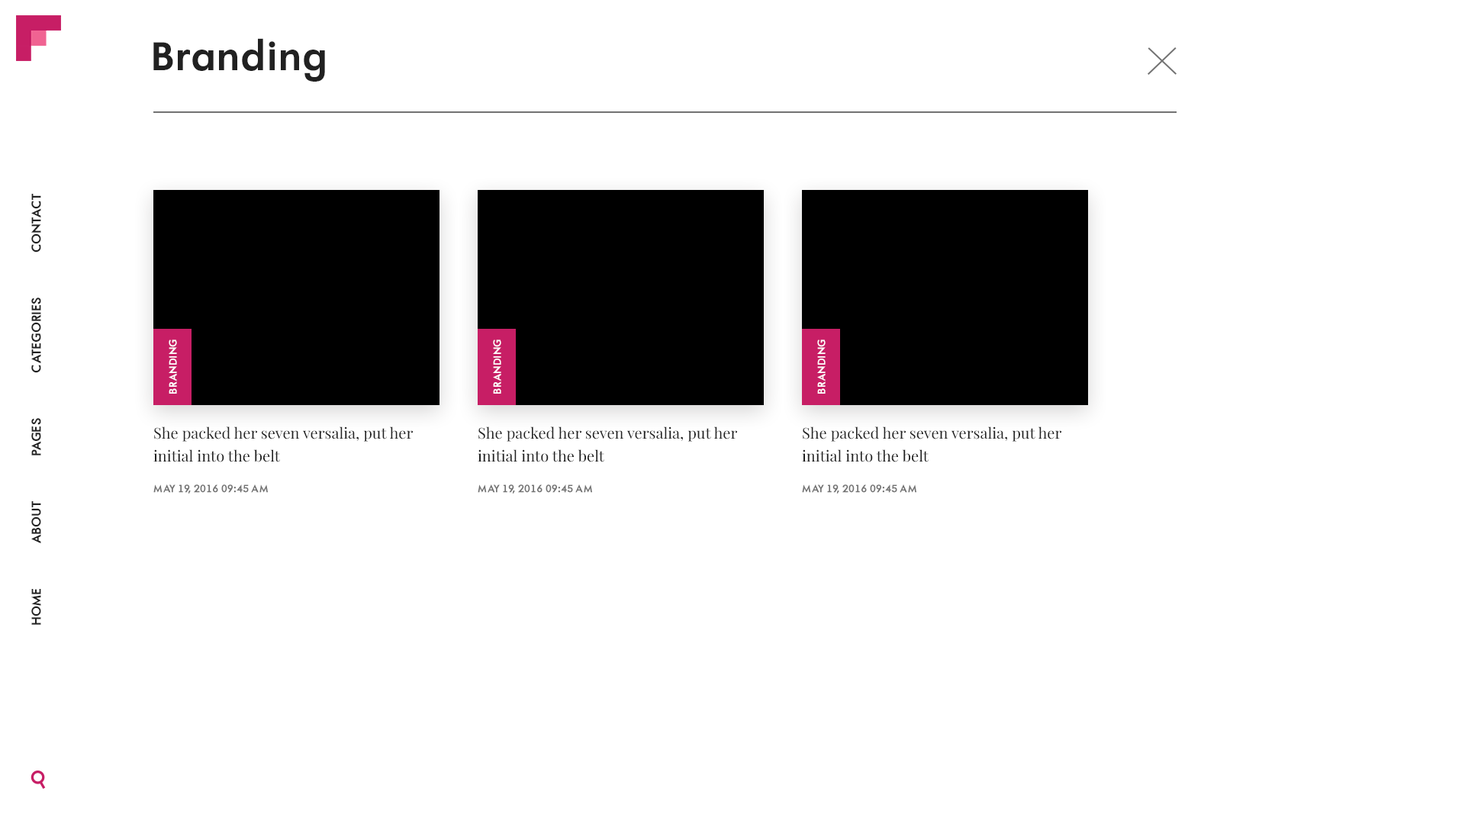
<style>
.page{position:relative;width:1465px;height:814px;background:#ffffff}
.page>*{position:absolute;margin:0}
.t1{font:38.1px "AFuturaOrtoBold";color:#212121}
.t2{font:12.2px "AFuturaOrtoBold";color:#212121;text-transform:uppercase}
.t3{font:9.9px "AFuturaOrtoBold";color:#ffffff;text-transform:uppercase}
.t4{font:15.3px/22.9px "PlayfairDisplay-Regular";color:#212121}
.t5{font:9.9px "AFuturaOrtoBold";color:#727272;text-transform:uppercase}
</style>
<div class="page">
<p class="t1" style="left:153px;top:38px;width:172px;height:44px">Branding</p>
<p class="t2" style="left:31px;top:194px;width:10px;height:59px;rotate:-90deg">Contact</p>
<p class="t2" style="left:31px;top:298px;width:10px;height:75px;rotate:-90deg">categories</p>
<p class="t3" style="left:169px;top:340px;width:8px;height:54px;rotate:-90deg">branding</p>
<p class="t3" style="left:493px;top:340px;width:8px;height:54px;rotate:-90deg">branding</p>
<p class="t3" style="left:817px;top:340px;width:8px;height:54px;rotate:-90deg">branding</p>
<p class="t2" style="left:31px;top:418px;width:10px;height:37px;rotate:-90deg">pages</p>
<p class="t4" style="left:153px;top:426px;width:260px;height:36px">She packed her seven versalia, put her initial into the belt</p>
<p class="t4" style="left:478px;top:426px;width:259px;height:36px">She packed her seven versalia, put her initial into the belt</p>
<p class="t4" style="left:802px;top:426px;width:259px;height:36px">She packed her seven versalia, put her initial into the belt</p>
<p class="t5" style="left:153px;top:484px;width:115px;height:10px">may 19, 2016 09:45 AM</p>
<p class="t5" style="left:478px;top:484px;width:114px;height:10px">may 19, 2016 09:45 AM</p>
<p class="t5" style="left:802px;top:484px;width:114px;height:10px">may 19, 2016 09:45 AM</p>
<p class="t2" style="left:31px;top:501px;width:10px;height:43px;rotate:-90deg">about</p>
<p class="t2" style="left:31px;top:589px;width:10px;height:36px;rotate:-90deg">Home</p>
</div>
